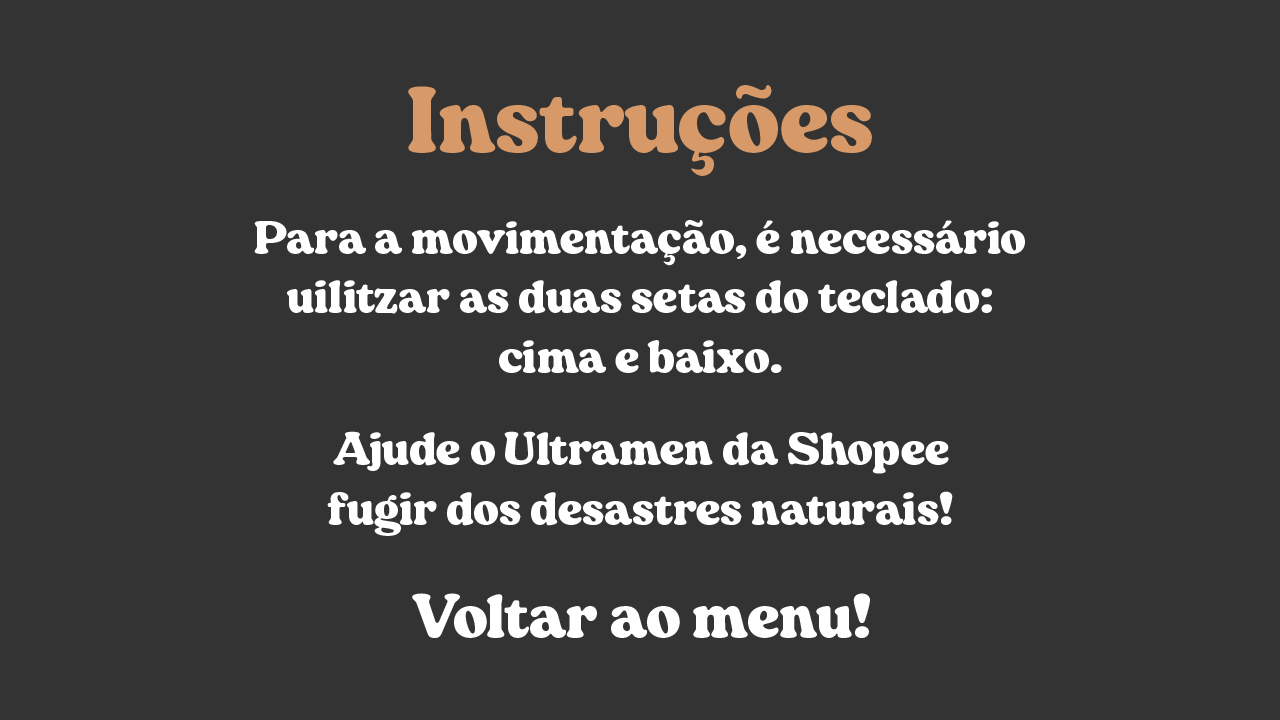
<style>
.page{position:relative;width:1280px;height:720px;background:#333333}
.page>*{position:absolute;margin:0}
.t1{font:100px "Manchego-Black";color:#d69967}
.t2{font:50px "Manchego-Black";color:#ffffff}
.t3{font:66.7px "Manchego-Black";color:#ffffff}
</style>
<div class="page">
<p class="t1" style="left:408px;top:85px;width:464px;height:91px">Instruções</p>
<p class="t2" style="left:254px;top:220px;width:771px;height:153px;text-align:center">Para a movimentação, é necessário<br>uilitzar as duas setas do teclado:<br>cima e baixo.</p>
<p class="t2" style="left:327px;top:431px;width:626px;height:105px;text-align:center">Ajude o Ultramen da Shopee<br>fugir dos desastres naturais!</p>
<p class="t3" style="left:412px;top:593px;width:458px;height:45px">Voltar ao menu!</p>
</div>
